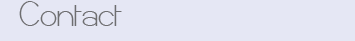
<style>
.page{position:relative;width:355px;height:41px;background:#e5e7f4}
.page>*{position:absolute;margin:0}
.t1{font:36px "Castorgate";color:#6e6e70}
</style>
<div class="page">
<p class="t1" style="left:19px;top:1px;width:103px;height:25px">Contact</p>
</div>
